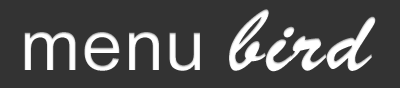
<style>
.page{position:relative;width:400px;height:88px;background:#333333}
.page>*{position:absolute;margin:0}
.t1{font:72px "ArialMT";letter-spacing:0.025em;color:#ffffff}
.t2{font:89px "BrushScriptStd";letter-spacing:0.025em;color:#ffffff}
</style>
<div class="page">
<p class="t1" style="left:24px;top:9px;width:352px;height:63px">menu <span class="t2">bird</span></p>
</div>
